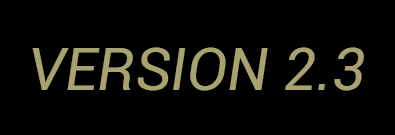
<style>
.page{position:relative;width:395px;height:135px;background:#000000}
.page>*{position:absolute;margin:0}
.t1{font:58.8px "Roboto-Italic";color:#a6a36e}
</style>
<div class="page">
<p class="t1" style="left:32px;top:47px;width:332px;height:44px">VERSION 2.3</p>
</div>
